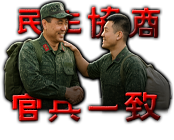
<style>
.page{position:relative;width:174px;height:140px;background:#ffffff}
.page>*{position:absolute;margin:0}
.t1{font:38.2px "FZZJ-MSHLFW"}
</style>
<div class="page">
<p class="t1" style="left:17px;top:6px;width:143px;height:33px">民主协商</p>
<p class="t1" style="left:12px;top:92px;width:149px;height:31px">官兵一致</p>
</div>
